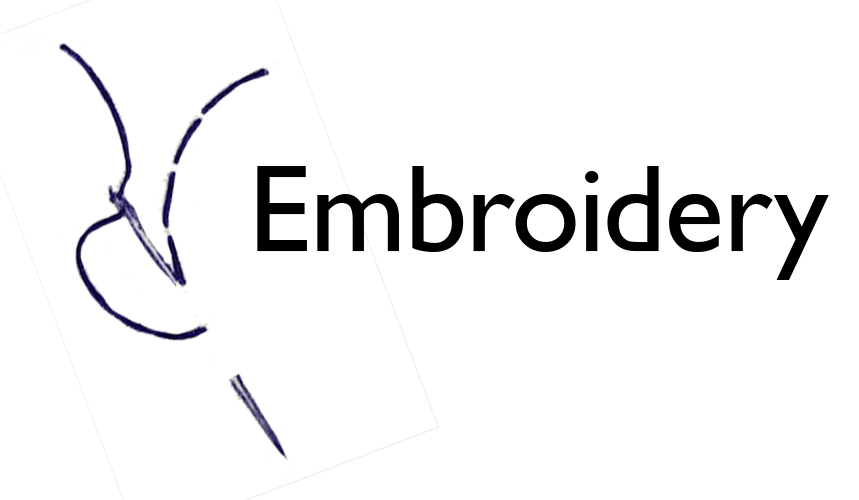
<style>
.page{position:relative;width:859px;height:500px;background:#ffffff}
.page>*{position:absolute;margin:0}
.t1{font:125px "GillSans";color:#000000}
</style>
<div class="page">
<p class="t1" style="left:257px;top:166px;width:572px;height:114px">Embroidery</p>
</div>
